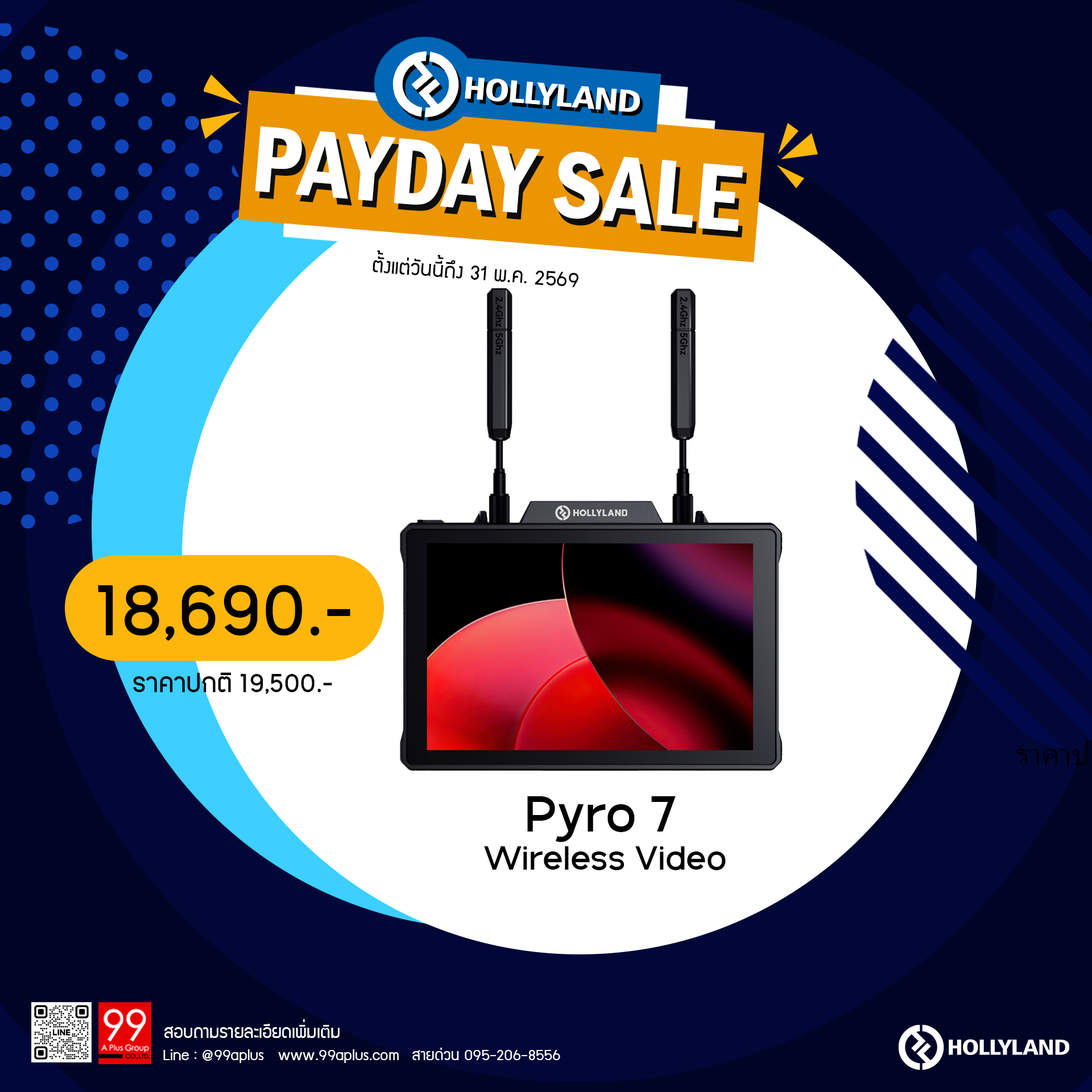
<style>
.page{position:relative;width:1092px;height:1092px;background:#ffffff}
.page>*{position:absolute;margin:0}
.t1{font:97.5px "FranklinGothic-DemiCond";color:#ffffff}
.t2{font:97.5px "FranklinGothic-DemiCond"}
.t3{font:23.2px "supermarket";color:#000000}
.t4{font:83.5px "PK-NakhonPathom-Demo";color:#000000}
.t5{font:30.3px "PK-NakhonPathom-Demo";color:#000000}
.t6{font:54px "GalakPro-Demo";color:#000000}
.t7{font:35.6px "GalakPro-Demo";color:#000000}
.t8{font:19.8px "supermarket";color:#ffffff}
.t9{font:17.2px "supermarket";color:#ffffff}
</style>
<div class="page">
<p class="t1" style="left:255px;top:126px;width:488px;height:105px;rotate:5deg">PAYDAY SALE</p>
<p class="t2" style="left:259px;top:133px;width:488px;height:105px;rotate:5deg">PAYDAY SALE</p>
<p class="t3" style="left:373px;top:250px;width:205px;height:37px;rotate:4deg">ตั้งแต่วันนี้ถึง 31 พ.ค. 2569</p>
<p class="t4" style="left:98px;top:585px;width:252px;height:56px">18,690.-</p>
<p class="t5" style="left:133px;top:672px;width:199px;height:22px">ราคาปกติ 19,500.-</p>
<p class="t6" style="left:527px;top:796px;width:149px;height:46px">Pyro 7</p>
<p class="t7" style="left:484px;top:846px;width:242px;height:24px">Wireless Video</p>
<p class="t8" style="left:164px;top:1019px;width:176px;height:19px">สอบถามรายละเอียดเพิ่มเติม</p>
<p class="t9" style="left:163px;top:1049px;width:236px;height:14px">Line : @99aplus   www.99aplus.com</p>
<p class="t9" style="left:412px;top:1048px;width:148px;height:12px">สายด่วน 095-206-8556</p>
</div>
